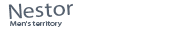
<style>
.page{position:relative;width:183px;height:30px;background:#ffffff}
.page>*{position:absolute;margin:0}
.t1{font:21.3px "MyriadPro-Regular";color:#556170;scale:1.12 1}
.t2{font:6.5px "MyriadPro-Regular";color:#556170;scale:1.32 1}
</style>
<div class="page">
<p class="t1" style="left:8px;top:3px;width:65px;height:16px;rotate:-4deg">Nestor</p>
<p class="t2" style="left:10px;top:21px;width:52px;height:6px">Men's territory</p>
</div>
